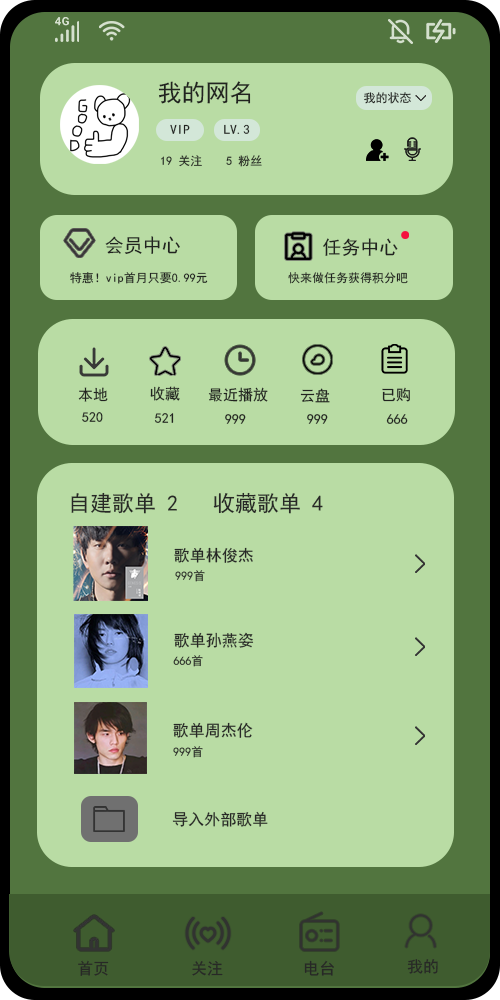
<style>
.page{position:relative;width:500px;height:1000px;background:#b9dca4}
.page>*{position:absolute;margin:0}
.t1{font:24px "SimHei";color:#212320}
.t2{font:12px "SimHei";color:#212320}
.t3{font:13px "SimHei";color:#212320}
.t4{font:19px "SimHei";color:#212320}
.t5{font:15px "SimHei";color:#212320}
.t6{font:14px "SimHei";color:#212320}
.t7{font:22px "SimHei";color:#272826}
.t8{font:16px "SimHei";color:#272826}
.t9{font:12px "SimHei"}
.t10{font:16px "SimHei";color:#282927}
</style>
<div class="page">
<p class="t1" style="left:158px;top:81px;width:93px;height:23px">我的网名</p>
<p class="t2" style="left:364px;top:92px;width:47px;height:12px">我的状态</p>
<p class="t3" style="left:170px;top:124px;width:20px;height:10px">VIP</p>
<p class="t3" style="left:224px;top:124px;width:26px;height:10px">LV.3</p>
<p class="t2" style="left:161px;top:155px;width:101px;height:12px">19 关注    5 粉丝</p>
<p class="t4" style="left:105px;top:236px;width:75px;height:18px">会员中心</p>
<p class="t4" style="left:323px;top:238px;width:75px;height:18px">任务中心</p>
<p class="t2" style="left:70px;top:272px;width:138px;height:12px">特惠！vip首月只要0.99元</p>
<p class="t2" style="left:288px;top:272px;width:120px;height:12px">快来做任务获得积分吧</p>
<p class="t5" style="left:78px;top:387px;width:30px;height:15px">本地</p>
<p class="t5" style="left:150px;top:386px;width:30px;height:15px">收藏</p>
<p class="t5" style="left:208px;top:387px;width:60px;height:15px">最近播放</p>
<p class="t5" style="left:300px;top:388px;width:30px;height:15px">云盘</p>
<p class="t5" style="left:382px;top:387px;width:28px;height:15px">已购</p>
<p class="t6" style="left:82px;top:412px;width:21px;height:10px">520</p>
<p class="t6" style="left:154px;top:413px;width:20px;height:10px">521</p>
<p class="t6" style="left:225px;top:414px;width:21px;height:10px">999</p>
<p class="t6" style="left:307px;top:414px;width:21px;height:10px">999</p>
<p class="t6" style="left:386px;top:414px;width:22px;height:10px">666</p>
<p class="t7" style="left:71px;top:492px;width:106px;height:22px">自建歌单 2</p>
<p class="t7" style="left:213px;top:492px;width:110px;height:22px">收藏歌单 4</p>
<p class="t8" style="left:174px;top:547px;width:79px;height:16px">歌单林俊杰<br>34</p>
<p class="t9" style="left:175px;top:570px;width:30px;height:12px">999首</p>
<p class="t8" style="left:174px;top:632px;width:80px;height:16px">歌单孙燕姿<br>34</p>
<p class="t9" style="left:173px;top:655px;width:30px;height:12px">666首</p>
<p class="t8" style="left:173px;top:722px;width:80px;height:16px">歌单周杰伦<br>34</p>
<p class="t9" style="left:173px;top:746px;width:30px;height:12px">999首</p>
<p class="t10" style="left:172px;top:811px;width:96px;height:16px">导入外部歌单</p>
<p class="t8" style="left:78px;top:960px;width:31px;height:16px">首页</p>
<p class="t8" style="left:192px;top:961px;width:31px;height:15px">关注</p>
<p class="t8" style="left:304px;top:960px;width:30px;height:16px">电台</p>
<p class="t8" style="left:407px;top:959px;width:31px;height:15px">我的</p>
</div>
